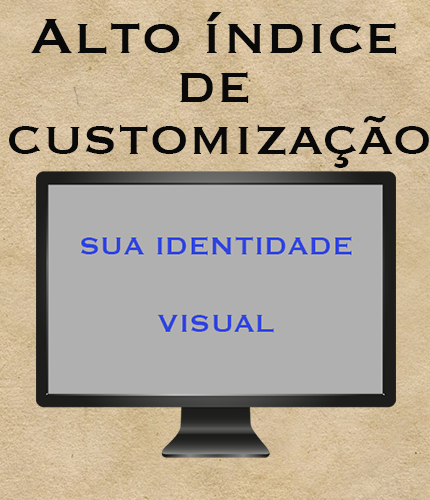
<style>
.page{position:relative;width:430px;height:500px;background:#b0b0b0}
.page>*{position:absolute;margin:0}
.t1{font:64.9px "Copperplate";color:#090909}
.t2{font:62px "Copperplate";color:#090909}
</style>
<div class="page">
<p class="t1" style="left:31px;top:12px;width:366px;height:42px">Alto índice</p>
<p class="t1" style="left:180px;top:72px;width:69px;height:31px">de</p>
<p class="t2" style="left:9px;top:116px;width:420px;height:52px">customização</p>
</div>
